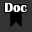
<style>
.page{position:relative;width:32px;height:32px;background:#333333}
.page>*{position:absolute;margin:0}
.t1{font:13.3px "BritannicBold";color:#ffffff}
</style>
<div class="page">
<p class="t1" style="left:5px;top:2px;width:22px;height:10px">Doc</p>
</div>
